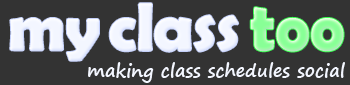
<style>
.page{position:relative;width:350px;height:85px;background:#333333}
.page>*{position:absolute;margin:0}
.t1{font:67px "BerlinSansFBDemi-Bold";color:#f3f6ff}
.t2{font:67px "BerlinSansFBDemi-Bold";color:#96ffa0}
.t3{font:18px "SegoePrint-Bold";color:#f3f6ff}
</style>
<div class="page">
<p class="t1" style="left:109px;top:3px;width:130px;height:49px">class</p>
<p class="t2" style="left:250px;top:7px;width:94px;height:45px">too</p>
<p class="t1" style="left:10px;top:18px;width:89px;height:43px">my</p>
<p class="t3" style="left:88px;top:62px;width:257px;height:21px">making class schedules social</p>
</div>
